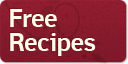
<style>
.page{position:relative;width:128px;height:64px}
.page>*{position:absolute;margin:0}
.t1{font:25px/24px "Felbridge-Bold";letter-spacing:-0.02em;color:#fffde9}
</style>
<div class="page">
<p class="t1" style="left:10px;top:9px;width:86px;height:47px">Free<br>Recipes</p>
</div>
